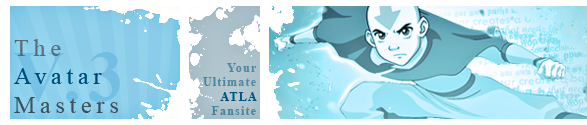
<style>
.page{position:relative;width:587px;height:125px}
.page>*{position:absolute;margin:0}
.t1{font:24px "TimesNewRomanPSMT";letter-spacing:0.2em}
.t2{font:12px "TimesNewRomanPS-BoldMT";letter-spacing:0.1em;color:#5f94ab}
.t3{font:12px "TimesNewRomanPS-BoldMT";letter-spacing:0.1em;color:#0e678e}
</style>
<div class="page">
<p class="t1" style="left:14px;top:39px;width:104px;height:74px">The<br>Avatar<br>Masters</p>
<p class="t2" style="left:203px;top:63px;width:54px;height:52px;text-align:right">Your Ultimate <span class="t3">ATLA</span> Fansite</p>
</div>
